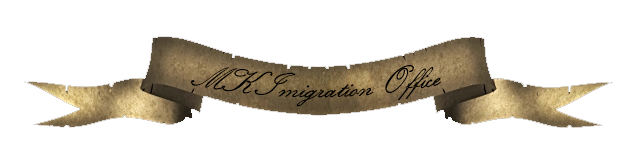
<style>
.page{position:relative;width:628px;height:155px;background:#ffffff}
.page>*{position:absolute;margin:0}
.t1{font:36px "KunstlerScript";color:#000000}
</style>
<div class="page">
<p class="t1" style="left:191px;top:65px;width:251px;height:42px">MK Imigration Office</p>
</div>
